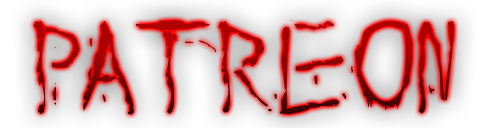
<style>
.page{position:relative;width:496px;height:128px}
.page>*{position:absolute;margin:0}
.t1{font:133.2px "AboutDead"}
</style>
<div class="page">
<p class="t1" style="left:33px;top:20px;width:421px;height:95px">Patreon</p>
</div>
